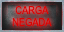
<style>
.page{position:relative;width:64px;height:32px}
.page>*{position:absolute;margin:0}
.t1{font:11px/12px "ArialMT";letter-spacing:-0.04em;color:#d90303;text-transform:uppercase;scale:0.85 1}
</style>
<div class="page">
<p class="t1" style="left:12px;top:5px;width:40px;height:22px;text-align:center">CARGA<br>negadA</p>
</div>
